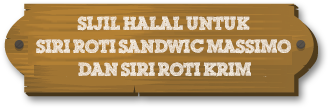
<style>
.page{position:relative;width:328px;height:108px}
.page>*{position:absolute;margin:0}
.t1{font:18px/23px "ScribbleBoxDEMO";color:#f5eee4}
</style>
<div class="page">
<p class="t1" style="left:36px;top:16px;width:255px;height:61px;text-align:center">Sijil Halal untuk <br>Siri Roti Sandwic Massimo <br>dan Siri Roti Krim</p>
</div>
